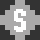
<style>
.page{position:relative;width:40px;height:40px;background:#aaa9a9}
.page>*{position:absolute;margin:0}
.t1{font:27.9px "04b25";letter-spacing:0.014em;color:#ffffff}
</style>
<div class="page">
<p class="t1" style="left:14px;top:9px;width:12px;height:23px">S</p>
</div>
